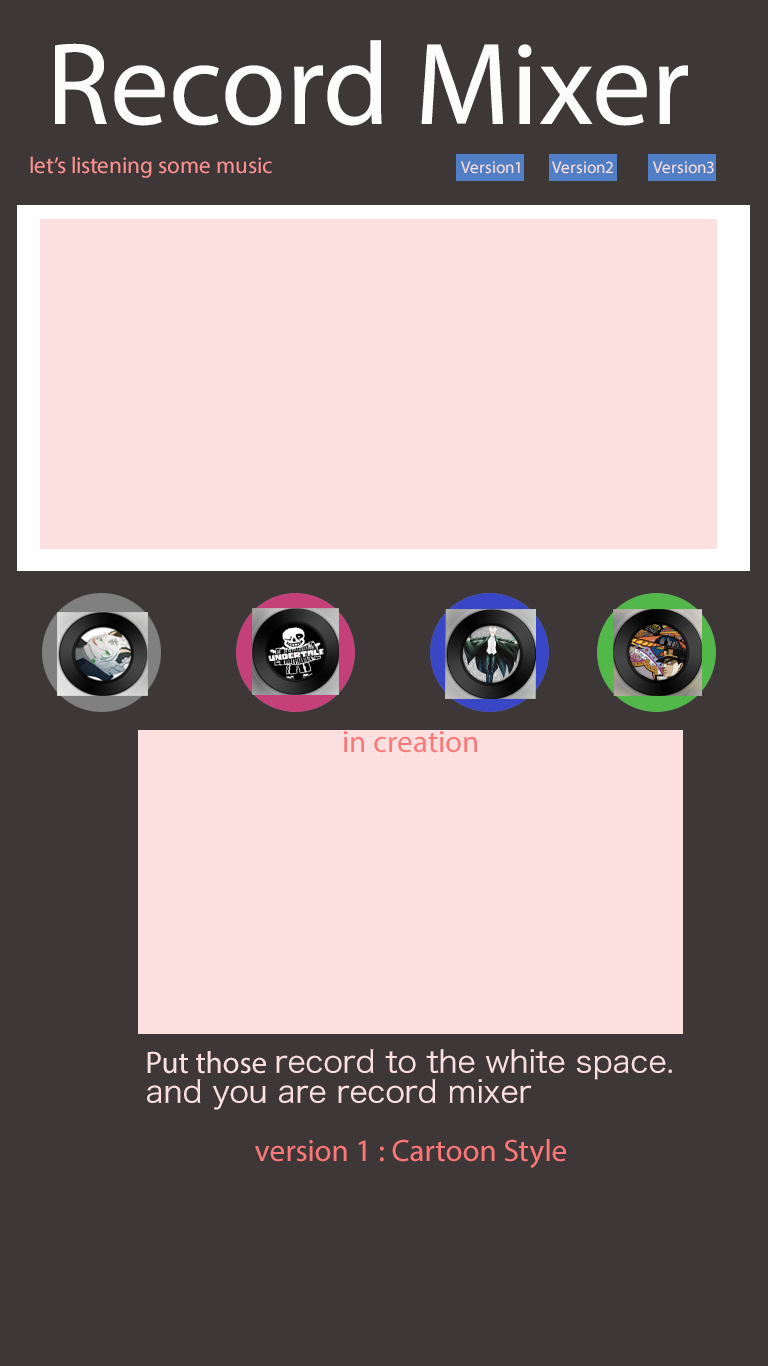
<style>
.page{position:relative;width:768px;height:1366px;background:#3e3737}
.page>*{position:absolute;margin:0}
.t1{font:118px "MyriadPro-Regular";color:#fcfcfc}
.t2{font:23px "MyriadPro-Regular";color:#fc9292}
.t3{font:17px "MyriadPro-Regular";color:#fce0e0}
.t4{font:31px "MyriadPro-Regular";color:#fc7777}
.t5{font:31px/30px "HiraKakuProN-W3";color:#fce0e0}
.t6{font:31px/30px "MyriadPro-Regular";color:#fce0e0}
</style>
<div class="page">
<p class="t1" style="left:55px;top:40px;width:633px;height:86px">Record Mixer</p>
<p class="t2" style="left:30px;top:156px;width:242px;height:22px">let’s listening some music</p>
<p class="t3" style="left:461px;top:161px;width:59px;height:13px">Version1</p>
<p class="t3" style="left:552px;top:161px;width:61px;height:13px">Version2</p>
<p class="t3" style="left:653px;top:161px;width:61px;height:13px">Version3</p>
<p class="t4" style="left:343px;top:731px;width:134px;height:22px">in creation</p>
<p class="t5" style="left:147px;top:1049px;width:525px;height:61px"><span class="t6">Put those </span>record to the white space.<br>and you are record mixer</p>
<p class="t4" style="left:255px;top:1139px;width:311px;height:29px">version 1 : Cartoon Style</p>
</div>
